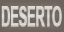
<style>
.page{position:relative;width:64px;height:32px}
.page>*{position:absolute;margin:0}
.t1{font:27.3px "Arial-BoldMT";letter-spacing:-0.03em;color:#dedbd8;font-weight:bold;scale:0.46 1}
</style>
<div class="page">
<p class="t1" style="left:1px;top:6px;width:61px;height:21px">DESERTO</p>
</div>
